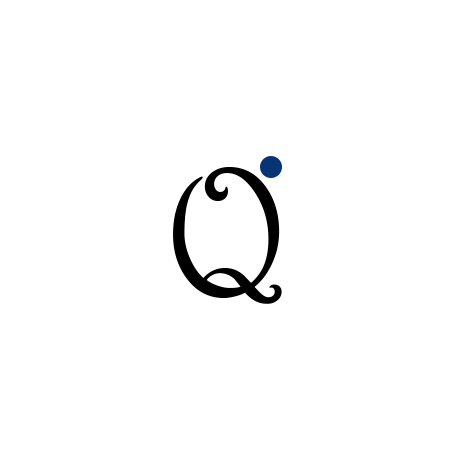
<style>
.page{position:relative;width:453px;height:471px;background:#ffffff}
.page>*{position:absolute;margin:0}
.t1{font:184px "Harrington";letter-spacing:0.13em;color:#000000}
</style>
<div class="page">
<p class="t1" style="left:173px;top:167px;width:109px;height:137px">Q</p>
</div>
